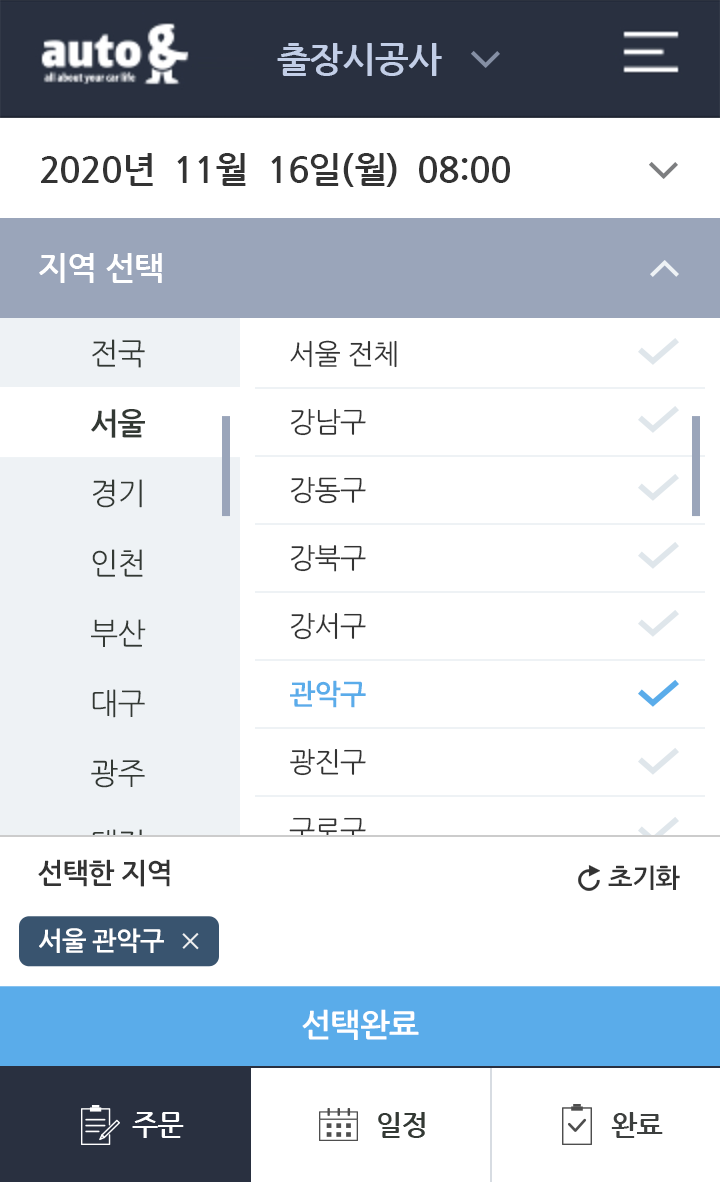
<style>
.page{position:relative;width:720px;height:1182px;background:#ffffff}
.page>*{position:absolute;margin:0}
.t1{font:36px "NanumGothicBold";letter-spacing:-0.025em;color:#c2cee7}
.t2{font:36px "NanumGothicBold";letter-spacing:-0.025em;color:#333333}
.t3{font:32px "NanumGothicBold";letter-spacing:-0.025em;color:#ffffff}
.t4{font:28px/68px "NanumGothic";letter-spacing:-0.025em;color:#333333}
.t5{font:28px/68px "NanumGothicBold";letter-spacing:-0.025em;color:#5aacea}
.t6{font:28px "NanumGothicBold";letter-spacing:-0.025em;color:#333333}
.t7{font:26px "NanumGothicBold";letter-spacing:-0.025em;color:#333333}
.t8{font:26px "NanumGothicBold";letter-spacing:-0.025em;color:#ffffff}
</style>
<div class="page">
<p class="t1" style="left:277px;top:43px;width:165px;height:33px">출장시공사</p>
<p class="t2" style="left:41px;top:153px;width:469px;height:34px">2020년  11월  16일(월)  08:00</p>
<p class="t3" style="left:39px;top:253px;width:123px;height:30px">지역 선택</p>
<p class="t4" style="left:289px;top:340px;width:108px;height:639px">서울 전체<br>강남구<br>강동구<br>강북구<br>강서구<br><span class="t5">관악구<br></span>광진구<br>구로구<br>금천구<br>노원구</p>
<p class="t6" style="left:38px;top:859px;width:132px;height:28px">선택한 지역</p>
<p class="t7" style="left:608px;top:865px;width:72px;height:25px">초기화</p>
<p class="t8" style="left:39px;top:928px;width:125px;height:25px">서울 관악구</p>
<p class="t3" style="left:302px;top:1009px;width:117px;height:31px">선택완료</p>
</div>
